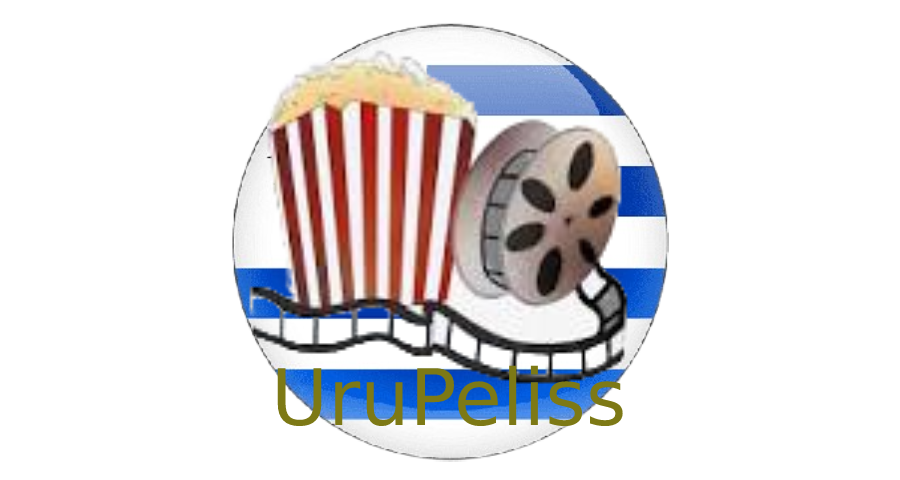
<style>
.page{position:relative;width:900px;height:480px;background:#ffffff}
.page>*{position:absolute;margin:0}
.t1{font:78px "DejaVuSans";color:#7d7915}
</style>
<div class="page">
<p class="t1" style="left:277px;top:365px;width:346px;height:62px">UruPeliss</p>
</div>
